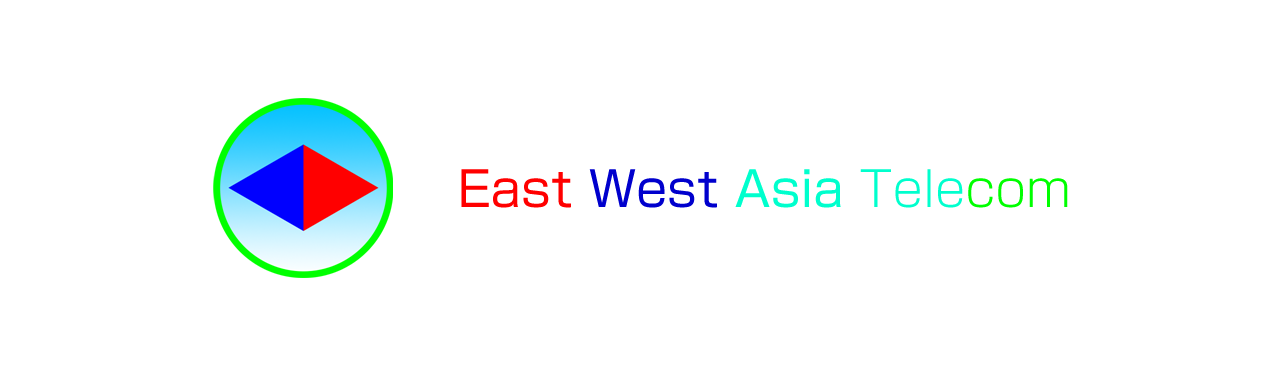
<style>
.page{position:relative;width:1280px;height:376px;background:#ffffff}
.page>*{position:absolute;margin:0}
.t1{font:48px "ShinGoPr6-Regular";color:#ff0000}
.t2{font:48px "ShinGoPr6-Regular";color:#0000cd}
.t3{font:48px "ShinGoPr6-Regular";color:#00ffcd}
.t4{font:48px "ShinGoPr6-Light";color:#00ffcd}
.t5{font:48px "ShinGoPr6-Light";color:#00ff00}
</style>
<div class="page">
<p class="t1" style="left:461px;top:169px;width:607px;height:39px">East <span class="t2">West</span><span class="t3"> Asia </span><span class="t4">Tele</span><span class="t5">com</span></p>
</div>
